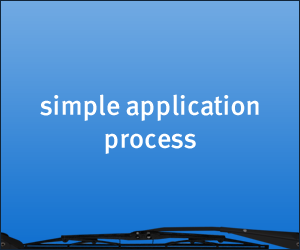
<style>
.page{position:relative;width:300px;height:250px}
.page>*{position:absolute;margin:0}
.t1{font:28px "MetaMediumLF-Roman";letter-spacing:-0.005em;color:#ffffff}
</style>
<div class="page">
<p class="t1" style="left:40px;top:94px;width:219px;height:60px;text-align:center">simple application process</p>
</div>
